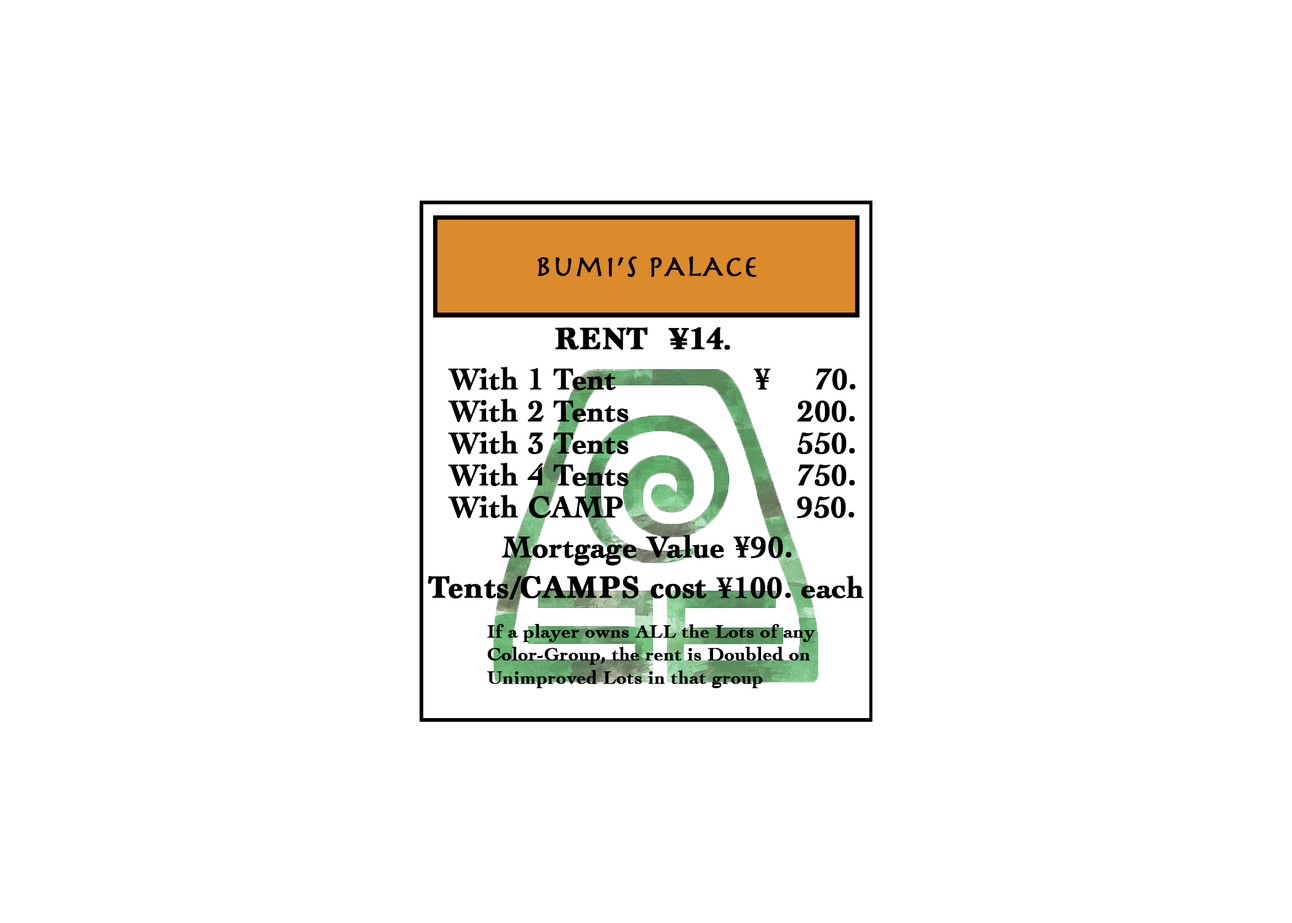
<style>
.page{position:relative;width:1292px;height:923px;background:#ffffff}
.page>*{position:absolute;margin:0}
.t1{font:30.8px "Herculanum";color:#000000;font-weight:bold}
.t2{font:32px "Marion-Bold";color:#000000;font-weight:bold}
.t3{font:30.8px "Cochin-Bold";color:#000000;font-weight:bold}
.t4{font:19.2px "Cochin-Bold";color:#000000;font-weight:bold}
</style>
<div class="page">
<p class="t1" style="left:537px;top:256px;width:220px;height:21px">bumi’s pAlAce</p>
<p class="t2" style="left:555px;top:327px;width:175px;height:23px">RENT  ¥14.</p>
<p class="t3" style="left:448px;top:367px;width:408px;height:23px">With 1 Tent               ¥     70.</p>
<p class="t3" style="left:448px;top:399px;width:407px;height:23px">With 2 Tents                   200.</p>
<p class="t3" style="left:448px;top:431px;width:407px;height:23px">With 3 Tents                   550.</p>
<p class="t3" style="left:448px;top:463px;width:407px;height:23px">With 4 Tents                   750.</p>
<p class="t3" style="left:448px;top:495px;width:407px;height:23px">With CAMP                  950.</p>
<p class="t3" style="left:501px;top:535px;width:291px;height:30px">Mortgage Value ¥90.</p>
<p class="t2" style="left:428px;top:575px;width:436px;height:25px">Tents/CAMPS cost <span class="t3">¥100. each</span></p>
<p class="t4" style="left:487px;top:624px;width:328px;height:64px">If a player owns ALL the Lots of any <br>Color-Group, the rent is Doubled on <br>Unimproved Lots in that group</p>
</div>
